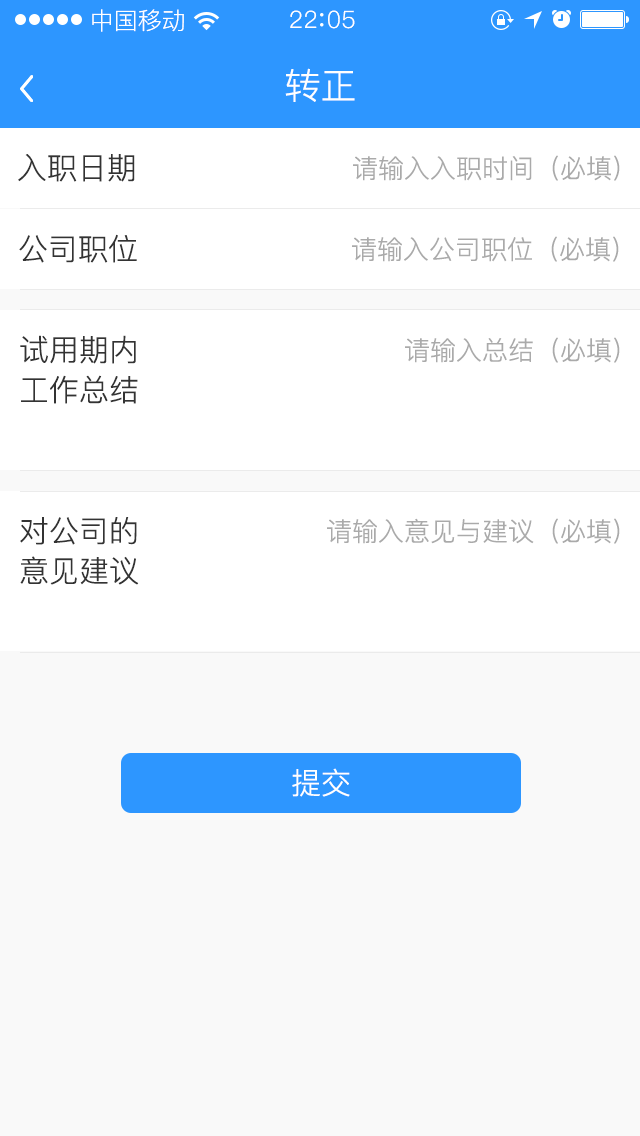
<style>
.page{position:relative;width:640px;height:1136px;background:#f9f9f9}
.page>*{position:absolute;margin:0}
.t1{font:24px "PingFang-SC-Regular";color:#ffffff}
.t2{font:24px "PingFang-SC-Regular";letter-spacing:0.03em;color:#ffffff}
.t3{font:36px "PingFang-SC-Regular";color:#ffffff}
.t4{font:30px "PingFang-SC-Regular";color:#333333}
.t5{font:26px "PingFang-SC-Regular";color:#aaaaaa}
.t6{font:30px/40px "PingFang-SC-Regular";color:#333333}
.t7{font:30px "PingFang-SC-Regular";color:#ffffff}
</style>
<div class="page">
<p class="t1" style="left:92px;top:9px;width:92px;height:23px">中国移动</p>
<p class="t2" style="left:290px;top:10px;width:65px;height:19px">22 05</p>
<p class="t3" style="left:285px;top:68px;width:70px;height:34px">转正</p>
<p class="t4" style="left:18px;top:154px;width:117px;height:28px">入职日期</p>
<p class="t5" style="left:353px;top:155px;width:267px;height:26px">请输入入职时间（必填）</p>
<p class="t4" style="left:19px;top:234px;width:118px;height:29px">公司职位</p>
<p class="t5" style="left:352px;top:236px;width:267px;height:26px">请输入公司职位（必填）</p>
<p class="t6" style="left:20px;top:335px;width:118px;height:69px;text-align:center">试用期内<br>工作总结</p>
<p class="t5" style="left:405px;top:337px;width:215px;height:26px">请输入总结（必填）</p>
<p class="t6" style="left:20px;top:517px;width:119px;height:68px;text-align:center">对公司的<br>意见建议</p>
<p class="t5" style="left:327px;top:518px;width:293px;height:26px">请输入意见与建议（必填）</p>
<p class="t7" style="left:292px;top:768px;width:58px;height:29px">提交</p>
</div>
